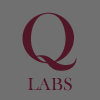
<style>
.page{position:relative;width:100px;height:100px;background:#707070}
.page>*{position:absolute;margin:0}
.t1{font:72px "BaskOldFace";color:#521629}
.t2{font:18px "BaskOldFace";color:#521629}
</style>
<div class="page">
<p class="t1" style="left:22px;top:12px;width:55px;height:59px">Q</p>
<p class="t2" style="left:28px;top:77px;width:44px;height:14px">LABS</p>
</div>
